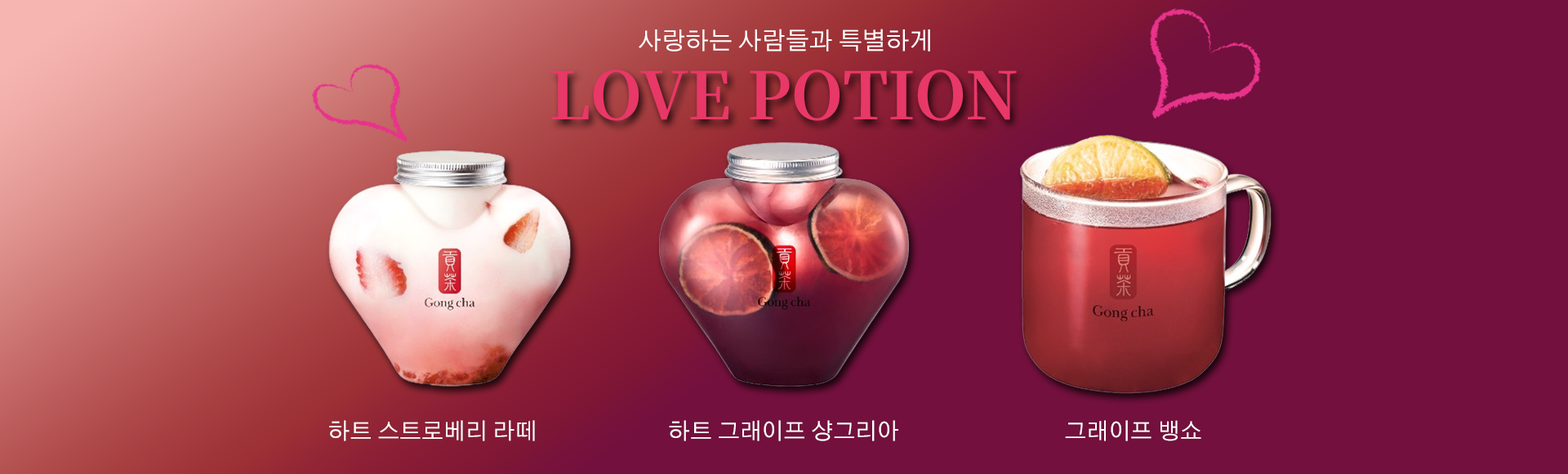
<style>
.page{position:relative;width:1568px;height:474px;background:#73103d}
.page>*{position:absolute;margin:0}
.t1{font:24.5px "GothicA1-Regular";color:#ffffff}
.t2{font:65.3px "NotoSerifKR-Bold";color:#e83867}
.t3{font:22.9px "GothicA1-Regular";color:#ffffff}
</style>
<div class="page">
<p class="t1" style="left:639px;top:29px;width:291px;height:22px">사랑하는 사람들과 특별하게</p>
<p class="t2" style="left:551px;top:69px;width:466px;height:52px">LOVE POTION</p>
<p class="t3" style="left:329px;top:420px;width:206px;height:21px">하트 스트로베리 라떼</p>
<p class="t3" style="left:669px;top:420px;width:229px;height:21px">하트 그래이프 샹그리아</p>
<p class="t3" style="left:1065px;top:420px;width:136px;height:21px">그래이프 뱅쇼</p>
</div>
